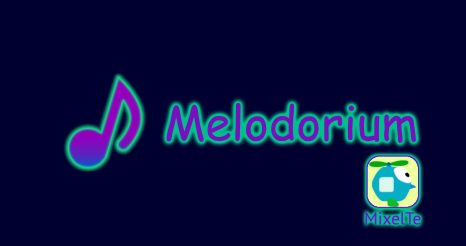
<style>
.page{position:relative;width:466px;height:246px;background:#000030}
.page>*{position:absolute;margin:0}
.t1{font:47px "ComicSansMS";color:#790fbd}
</style>
<div class="page">
<p class="t1" style="left:166px;top:103px;width:251px;height:40px">Melodorium</p>
</div>
